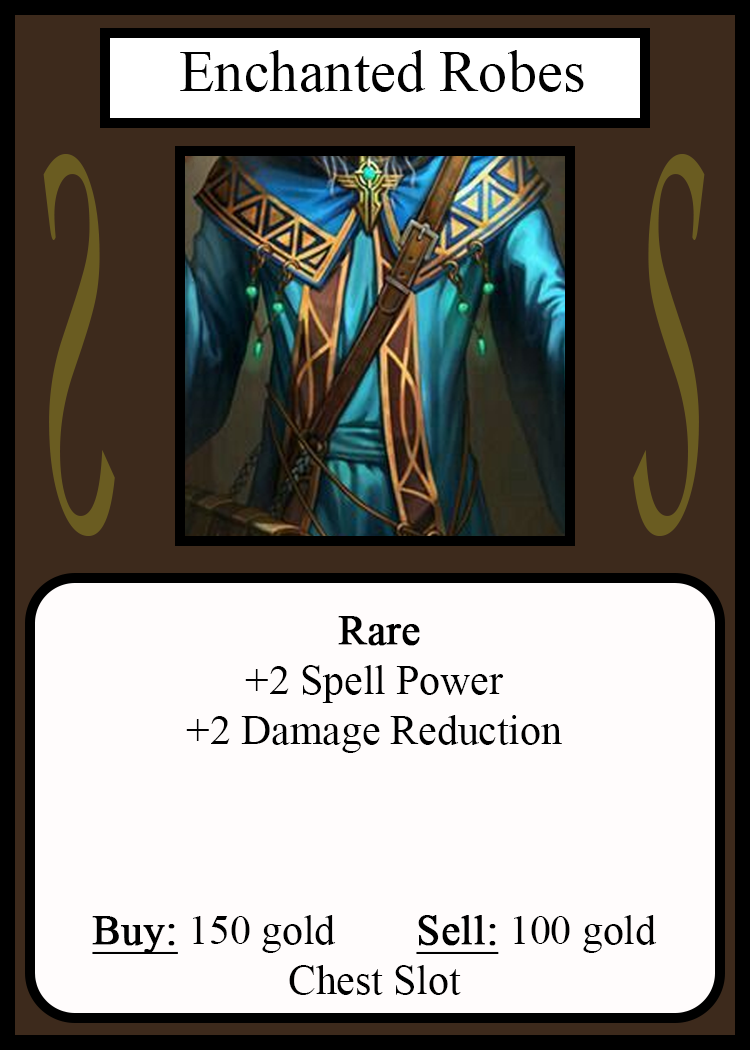
<style>
.page{position:relative;width:750px;height:1050px;background:#fffcfc}
.page>*{position:absolute;margin:0}
.t1{font:58.3px "TimesNewRomanPSMT";color:#010101}
.t2{font:548.5px "Apple-Chancery";color:#6a5c21;scale:0.27 1}
.t3{font:548.2px "Apple-Chancery";color:#6a5c21;scale:0.27 1}
.t4{font:41.7px "TimesNewRomanPSMT";color:#000000}
.t5{font:41.7px "TimesNewRomanPSMT";color:#000000;font-weight:bold}
.t6{font:41.7px "TimesNewRomanPSMT";color:#000000;font-weight:bold;text-decoration:underline}
</style>
<div class="page">
<p class="t1" style="left:180px;top:50px;width:404px;height:42px">Enchanted Robes</p>
<p class="t2" style="left:43px;top:154px;width:72px;height:382px;rotate:180deg">S</p>
<p class="t3" style="left:633px;top:154px;width:72px;height:382px">S</p>
<p class="t4" style="left:92px;top:616px;width:565px;height:379px;text-align:center"><span class="t5">Rare<br></span>+2 Spell Power<br>+2 Damage Reduction<br><br><br><br><span class="t6">Buy:</span> 150 gold   <span class="t6">Sell:</span> 100 gold<br>Chest Slot</p>
</div>
